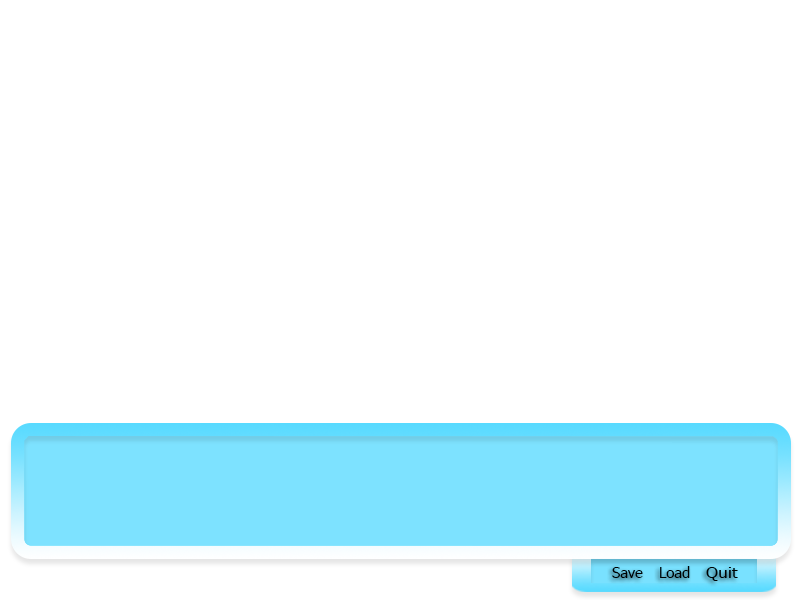
<style>
.page{position:relative;width:800px;height:600px;background:#ffffff}
.page>*{position:absolute;margin:0}
.t1{font:14.7px "Tahoma";color:#000000}
.t2{font:14.7px "Tahoma";color:#000000;scale:1.19 1}
</style>
<div class="page">
<p class="t1" style="left:612px;top:567px;width:31px;height:11px">Save</p>
<p class="t1" style="left:660px;top:566px;width:30px;height:12px">Load</p>
<p class="t2" style="left:706px;top:567px;width:32px;height:14px">Quit</p>
</div>
